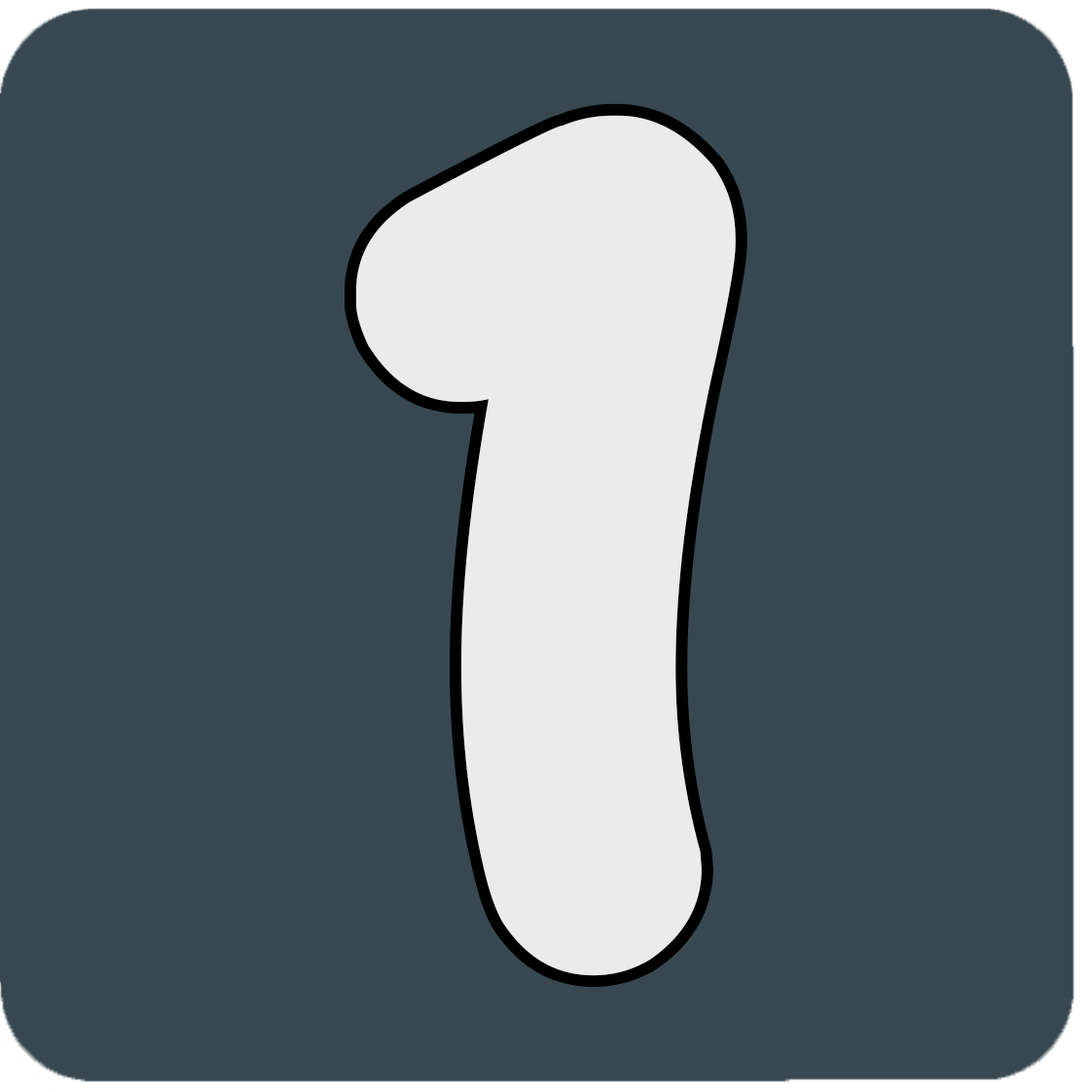
<style>
.page{position:relative;width:1092px;height:1092px;background:#374850}
.page>*{position:absolute;margin:0}
.t1{font:1362.5px "CARTOONIC";color:#ebebeb}
</style>
<div class="page">
<p class="t1" style="left:356px;top:115px;width:380px;height:861px">1</p>
</div>
